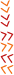
<style>
.page{position:relative;width:14px;height:75px;background:#ffffff}
.page>*{position:absolute;margin:0}
.t1{font:16px "ThrowMyHandsUpintheAir";color:#f3701a;text-transform:uppercase}
.t2{font:16px "ThrowMyHandsUpintheAir";color:#c11a1a;text-transform:uppercase}
</style>
<div class="page">
<p class="t1" style="left:0px;top:0px;width:10px;height:13px;rotate:90deg">&gt;&gt;</p>
<p class="t2" style="left:0px;top:14px;width:10px;height:13px;rotate:90deg">&gt;&gt;</p>
<p class="t2" style="left:0px;top:31px;width:14px;height:10px">&gt;&gt;</p>
<p class="t2" style="left:0px;top:54px;width:14px;height:9px;rotate:-180deg">&gt;&gt;</p>
<p class="t1" style="left:0px;top:42px;width:14px;height:10px">&gt;&gt;</p>
<p class="t1" style="left:0px;top:65px;width:14px;height:9px;rotate:-180deg">&gt;&gt;</p>
</div>
